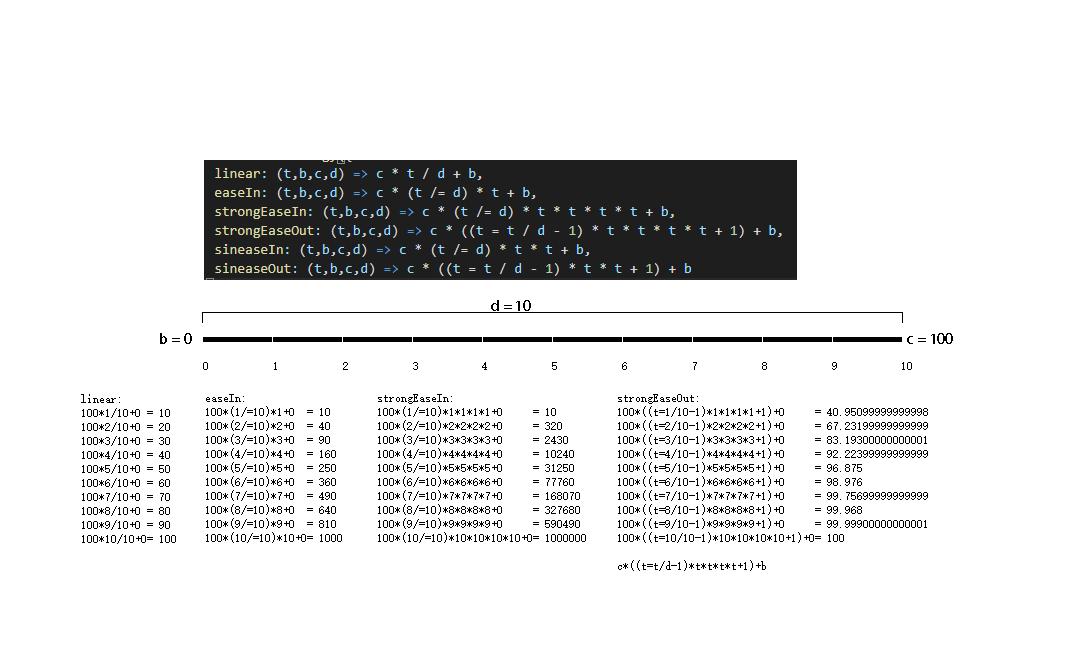
<style>
.page{position:relative;width:1082px;height:660px;background:#ffffff}
.page>*{position:absolute;margin:0}
.t1{font:14px "AdobeHeitiStd-Regular";color:#000000}
.t2{font:12px "SimSun";letter-spacing:-0.015em;color:#000000}
.t3{font:12px/14px "SimSun";color:#000000}
</style>
<div class="page">
<p class="t1" style="left:491px;top:300px;width:40px;height:11px">d = 10</p>
<p class="t2" style="left:203px;top:362px;width:709px;height:8px">0           1           2           3           4           5           6           7           8           9           10</p>
<p class="t3" style="left:81px;top:394px;width:95px;height:150px">linear:<br>100*1/10+0 = 10<br>100*2/10+0 = 20<br>100*3/10+0 = 30<br>100*4/10+0 = 40<br>100*5/10+0 = 50<br>100*6/10+0 = 60<br>100*7/10+0 = 70<br>100*8/10+0 = 80<br>100*9/10+0 = 90<br>100*10/10+0= 100</p>
<p class="t3" style="left:206px;top:394px;width:136px;height:149px">easeIn:<br>100*(1/=10)*1+0  = 10<br>100*(2/=10)*2+0  = 40<br>100*(3/=10)*3+0  = 90<br>100*(4/=10)*4+0  = 160<br>100*(5/=10)*5+0  = 250<br>100*(6/=10)*6+0  = 360<br>100*(7/=10)*7+0  = 490<br>100*(8/=10)*8+0  = 640<br>100*(9/=10)*9+0  = 810<br>100*(10/=10)*10+0= 1000</p>
<p class="t3" style="left:378px;top:394px;width:208px;height:149px">strongEaseIn:<br>100*(1/=10)*1*1*1*1+0     = 10<br>100*(2/=10)*2*2*2*2+0     = 320<br>100*(3/=10)*3*3*3*3+0     = 2430<br>100*(4/=10)*4*4*4*4+0     = 10240<br>100*(5/=10)*5*5*5*5+0     = 31250<br>100*(6/=10)*6*6*6*6+0     = 77760<br>100*(7/=10)*7*7*7*7+0     = 168070<br>100*(8/=10)*8*8*8*8+0     = 327680<br>100*(9/=10)*9*9*9*9+0     = 590490<br>100*(10/=10)*10*10*10*10+0= 1000000</p>
<p class="t3" style="left:618px;top:394px;width:310px;height:177px">strongEaseOut:<br>100*((t=1/10-1)*1*1*1*1+1)+0     = 40.95099999999998<br>100*((t=2/10-1)*2*2*2*2+1)+0     = 67.23199999999999<br>100*((t=3/10-1)*3*3*3*3+1)+0     = 83.19300000000001<br>100*((t=4/10-1)*4*4*4*4+1)+0     = 92.22399999999999<br>100*((t=5/10-1)*5*5*5*5+1)+0     = 96.875<br>100*((t=6/10-1)*6*6*6*6+1)+0     = 98.976<br>100*((t=7/10-1)*7*7*7*7+1)+0     = 99.75699999999999<br>100*((t=8/10-1)*8*8*8*8+1)+0     = 99.968<br>100*((t=9/10-1)*9*9*9*9+1)+0     = 99.99900000000001<br>100*((t=10/10-1)*10*10*10*10+1)+0= 100<br><br>c*((t=t/d-1)*t*t*t*t+1)+b</p>
</div>
